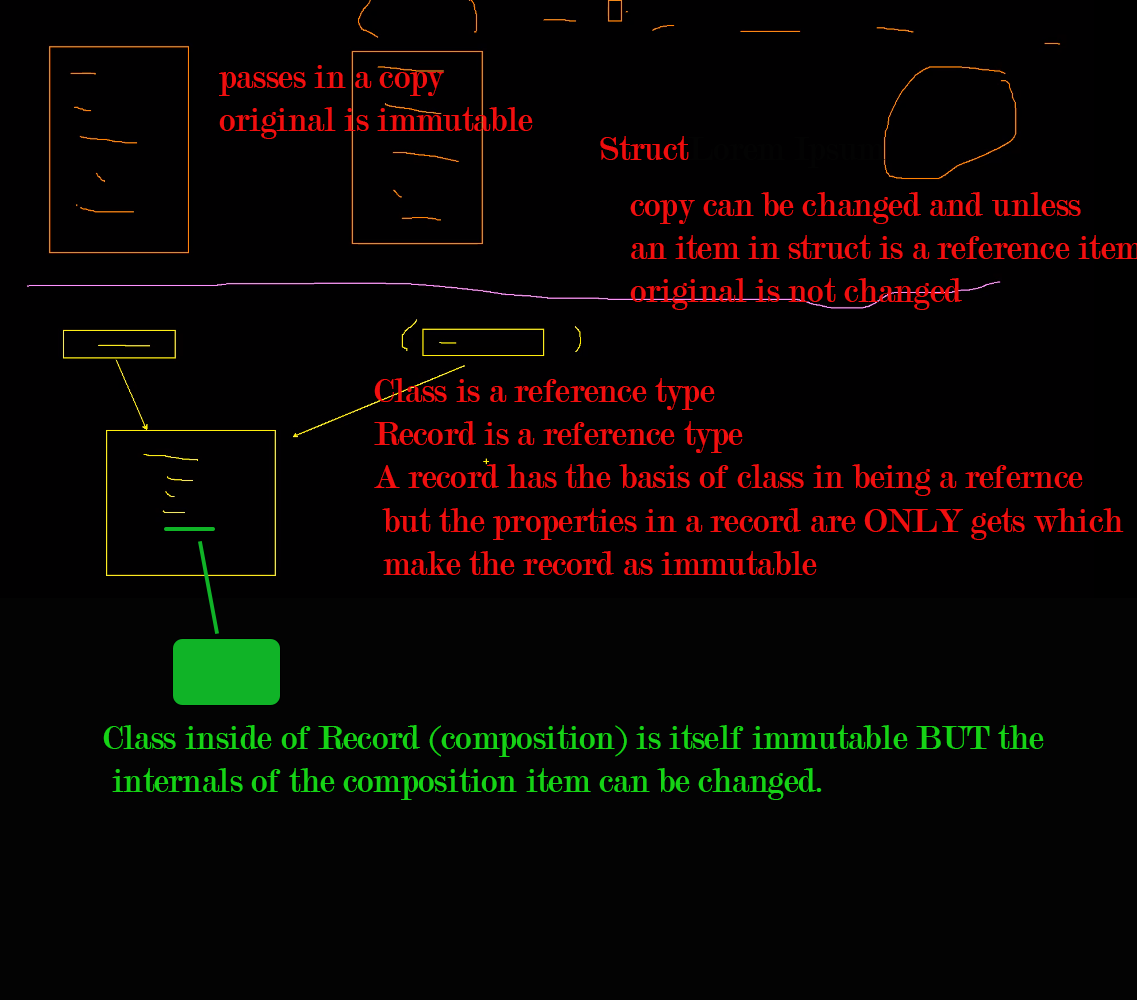
<style>
.page{position:relative;width:1137px;height:1000px;background:#010001}
.page>*{position:absolute;margin:0}
.t1{font:36px "Modern-Regular";color:#f10f0f}
.t2{font:36px "Modern-Regular";color:#030303}
.t3{font:36px "Modern-Regular";color:#ef0d0d}
.t4{font:36px "Modern-Regular";color:#16d316}
</style>
<div class="page">
<p class="t1" style="left:219px;top:65px;width:314px;height:74px">passes in a copy<br>original is immutable</p>
<p class="t2" style="left:600px;top:136px;width:285px;height:32px"><span class="t3">Struct</span>Lorem Ipsum</p>
<p class="t1" style="left:374px;top:378px;width:750px;height:197px">Class is a reference type<br>Record is a reference type<br>A record has the basis of class in being a refernce<br> but the properties in a record are ONLY gets which<br> make the record as immutable</p>
<p class="t4" style="left:103px;top:725px;width:941px;height:75px">Class inside of Record (composition) is itself immutable BUT the<br> internals of the composition item can be changed.</p>
</div>
